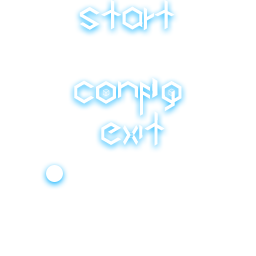
<style>
.page{position:relative;width:256px;height:256px;background:#ffffff}
.page>*{position:absolute;margin:0}
.t1{font:26.7px "Cubic";color:#ffffff}
.t2{font:22.7px "Cubic";color:#ffffff;scale:1.18 1}
.t3{font:46.7px "Cubic";color:#ffffff}
</style>
<div class="page">
<p class="t1" style="left:79px;top:0px;width:96px;height:31px">S<span class="t2">t</span>ar<span class="t2">t</span></p>
<p class="t1" style="left:74px;top:78px;width:108px;height:38px">conf<span class="t3">i</span>g</p>
</div>
